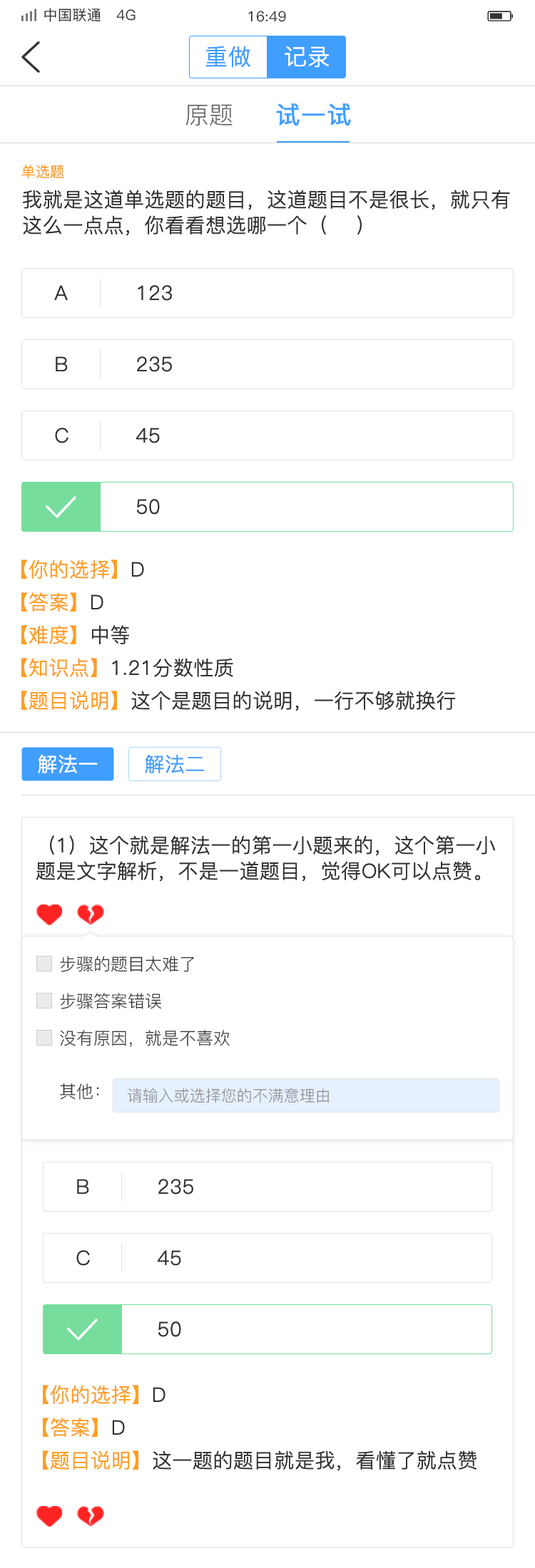
<style>
.page{position:relative;width:535px;height:1568px;background:#ffffff}
.page>*{position:absolute;margin:0}
.t1{font:14.3px "PingFang-SC-Medium";letter-spacing:0.02em;color:#333333}
.t2{font:22.8px "PingFang-SC-Regular";letter-spacing:0.02em;color:#409eff}
.t3{font:22.8px "PingFang-SC-Regular";letter-spacing:0.02em;color:#ffffff}
.t4{font:24.2px "PingFang-SC-Regular";color:#666666}
.t5{font:24.2px "PingFang-SC-Medium";letter-spacing:0.02em;color:#409eff;font-weight:bold}
.t6{font:14.3px "PingFang-SC-Regular";letter-spacing:0.02em;color:#ff9e21}
.t7{font:20px/25.7px "PingFang-SC-Regular";letter-spacing:0.02em;color:#333333}
.t8{font:20px "PingFang-SC-Regular";letter-spacing:0.02em;color:#333333}
.t9{font:20px "PingFang-SC-Regular";letter-spacing:0.02em;color:#ff9e21}
.t10{font:20px "PingFang-SC-Regular";letter-spacing:0.02em;color:#ffffff}
.t11{font:20px "PingFang-SC-Regular";letter-spacing:0.02em;color:#409eff}
.t12{font:17.1px "PingFang-SC-Regular";color:#333333}
.t13{font:15.7px "PingFang-SC-Regular";color:#8e8e8e}
</style>
<div class="page">
<p class="t1" style="left:44px;top:8px;width:91px;height:14px">中国联通   4G</p>
<p class="t1" style="left:248px;top:11px;width:38px;height:11px">16:49</p>
<p class="t2" style="left:205px;top:46px;width:45px;height:22px">重做</p>
<p class="t3" style="left:284px;top:46px;width:45px;height:22px">记录</p>
<p class="t4" style="left:185px;top:104px;width:47px;height:22px">原题</p>
<p class="t5" style="left:276px;top:103px;width:75px;height:23px">试一试</p>
<p class="t6" style="left:21px;top:165px;width:43px;height:13px">单选题</p>
<p class="t7" style="left:23px;top:190px;width:487px;height:46px">我就是这道单选题的题目，这道题目不是很长，就只有这么一点点，你看看想选哪一个（    ）</p>
<p class="t8" style="left:54px;top:285px;width:14px;height:15px">A</p>
<p class="t8" style="left:138px;top:285px;width:34px;height:16px">123</p>
<p class="t8" style="left:56px;top:356px;width:12px;height:15px">B</p>
<p class="t8" style="left:137px;top:356px;width:35px;height:16px">235</p>
<p class="t8" style="left:55px;top:428px;width:13px;height:15px">C</p>
<p class="t8" style="left:136px;top:428px;width:24px;height:15px">45</p>
<p class="t8" style="left:137px;top:499px;width:23px;height:16px">50</p>
<p class="t9" style="left:21px;top:559px;width:123px;height:20px">【你的选择】<span class="t8">D</span></p>
<p class="t9" style="left:21px;top:592px;width:82px;height:20px">【答案】<span class="t8">D</span></p>
<p class="t9" style="left:21px;top:625px;width:108px;height:19px">【难度】<span class="t8">中等</span></p>
<p class="t8" style="left:21px;top:658px;width:212px;height:19px"><span class="t9">【知识点】</span>1.21分数性质</p>
<p class="t8" style="left:21px;top:691px;width:434px;height:20px"><span class="t9">【题目说明】</span>这个是题目的说明，一行不够就换行</p>
<p class="t10" style="left:38px;top:754px;width:60px;height:19px">解法一</p>
<p class="t11" style="left:145px;top:754px;width:60px;height:19px">解法二</p>
<p class="t7" style="left:36px;top:835px;width:459px;height:47px">（1）这个就是解法一的第一小题来的，这个第一小题是文字解析，不是一道题目，觉得OK可以点赞。</p>
<p class="t12" style="left:60px;top:956px;width:134px;height:16px">步骤的题目太难了</p>
<p class="t12" style="left:60px;top:993px;width:101px;height:16px">步骤答案错误</p>
<p class="t12" style="left:60px;top:1030px;width:169px;height:17px">没有原因，就是不喜欢</p>
<p class="t12" style="left:60px;top:1083px;width:39px;height:17px">其他：</p>
<p class="t13" style="left:127px;top:1088px;width:202px;height:15px">请输入或选择您的不满意理由</p>
<p class="t8" style="left:77px;top:1179px;width:12px;height:15px">B</p>
<p class="t8" style="left:158px;top:1179px;width:35px;height:16px">235</p>
<p class="t8" style="left:76px;top:1250px;width:14px;height:16px">C</p>
<p class="t8" style="left:158px;top:1250px;width:23px;height:16px">45</p>
<p class="t8" style="left:158px;top:1321px;width:23px;height:16px">50</p>
<p class="t9" style="left:43px;top:1385px;width:122px;height:19px">【你的选择】<span class="t8">D</span></p>
<p class="t9" style="left:43px;top:1418px;width:82px;height:19px">【答案】<span class="t8">D</span></p>
<p class="t8" style="left:43px;top:1450px;width:433px;height:21px"><span class="t9">【题目说明】</span>这一题的题目就是我，看懂了就点赞</p>
</div>
